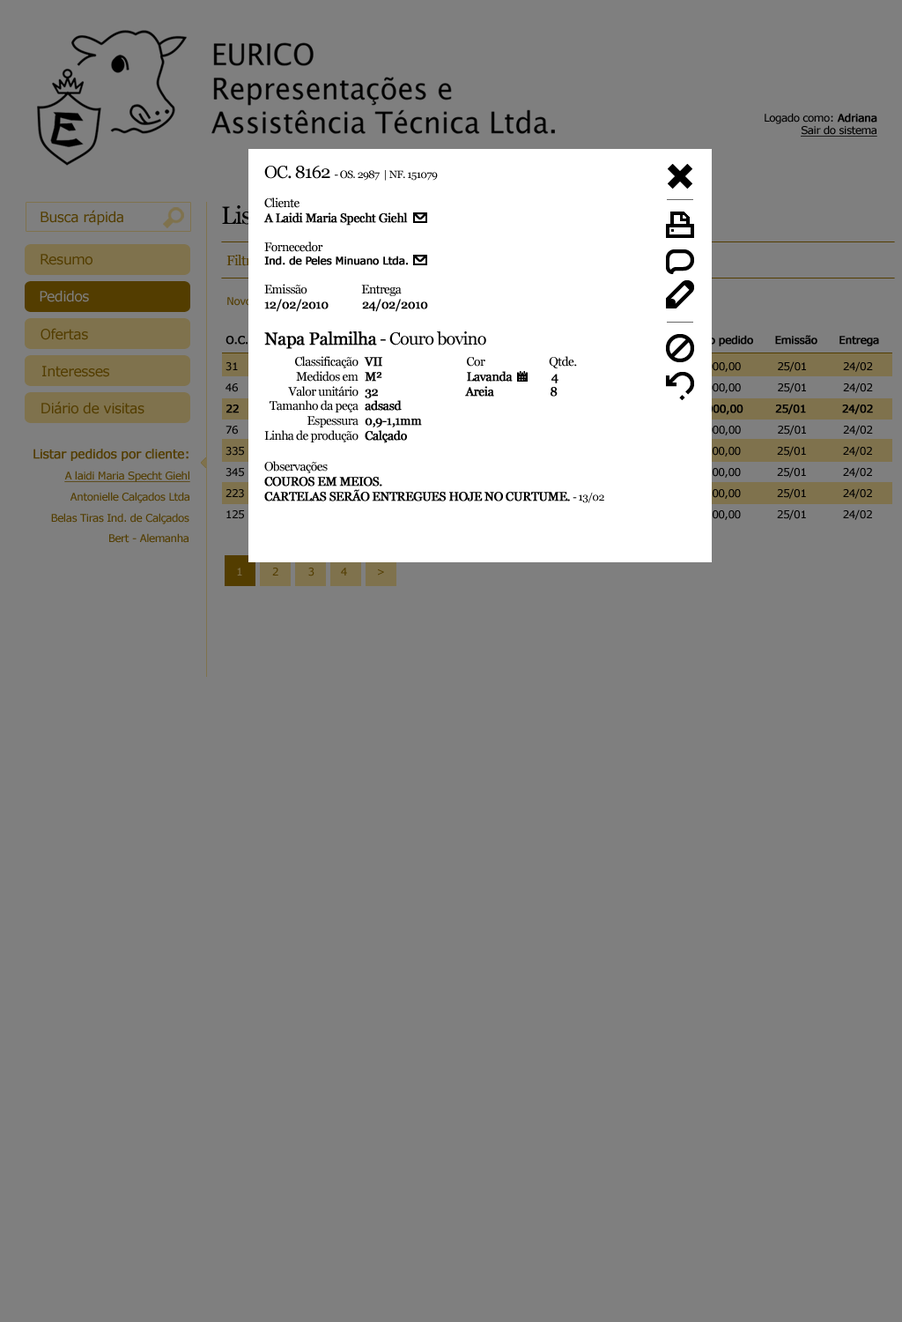
<style>
.page{position:relative;width:902px;height:1322px;background:#7f7f7f}
.page>*{position:absolute;margin:0}
.t1{font:10.6px "Verdana";letter-spacing:-0.04em;color:#000000;text-decoration:underline}
.t2{font:10.6px "Verdana";letter-spacing:-0.04em;color:#000000}
.t3{font:10.6px "Verdana";letter-spacing:-0.04em;color:#000000;font-weight:bold}
.t4{font:10.6px "Georgia";letter-spacing:-0.04em;color:#000000}
.t5{font:17.6px "Georgia";letter-spacing:-0.04em;color:#000000}
.t6{font:12.3px "Georgia";letter-spacing:-0.04em;color:#000000}
.t7{font:12.3px "Georgia";letter-spacing:-0.04em;color:#000000;font-weight:bold}
.t8{font:17.6px "Georgia";letter-spacing:-0.04em;color:#000000;font-weight:bold}
.t9{font:14.1px "Verdana";letter-spacing:-0.04em;color:#533d00}
.t10{font:14.1px "Georgia";letter-spacing:-0.04em;color:#533d00}
.t11{font:14.1px "Verdana";letter-spacing:-0.04em;color:#7f7f7f}
.t12{font:12.3px/14.8px "Georgia";letter-spacing:-0.04em;color:#000000}
.t13{font:12.3px "Verdana";letter-spacing:-0.04em;color:#533d00;font-weight:bold}
.t14{font:10.6px "Verdana";letter-spacing:-0.04em;color:#533d00;text-decoration:underline}
.t15{font:10.6px "Verdana";letter-spacing:-0.04em;color:#533d00}
</style>
<div class="page">
<p class="t1" style="left:765px;top:113px;width:113px;height:24px;text-align:right"><span class="t2">Logado como: </span><span class="t3">Adriana<br></span>Sair do sistema</p>
<p class="t4" style="left:264px;top:166px;width:174px;height:15px"><span class="t5">OC. 8162</span>  - OS. 2987  | NF. 151079</p>
<p class="t6" style="left:263px;top:197px;width:223px;height:152px">Cliente<br><span class="t7">A Laidi Maria Specht Giehl<br></span><br>Fornecedor<br><span class="t3">Ind. de Peles Minuano Ltda.<br></span><br>Emissão                      Entrega<br><span class="t7">12/02/2010            24/02/2010<br><br></span><span class="t8">Napa Palmilha</span><span class="t5"> - Couro bovino</span></p>
<p class="t9" style="left:41px;top:210px;width:82px;height:16px">Busca rápida</p>
<p class="t9" style="left:41px;top:254px;width:52px;height:11px">Resumo</p>
<p class="t10" style="left:226px;top:255px;width:37px;height:11px">Filtrar</p>
<p class="t11" style="left:40px;top:290px;width:49px;height:12px">Pedidos</p>
<p class="t9" style="left:41px;top:328px;width:47px;height:12px">Ofertas</p>
<p class="t9" style="left:42px;top:366px;width:67px;height:11px">Interesses</p>
<p class="t6" style="left:264px;top:356px;width:95px;height:86px;text-align:right">Classificação<br>Medidos em<br>Valor unitário<br>Tamanho da peça<br>Espessura<br>Linha de produção</p>
<p class="t7" style="left:364px;top:356px;width:213px;height:87px">VII                              <span class="t12">Cor                          Qtde.<br></span>M²                              Lavanda              4<br>32                               Areia                    8<br>adsasd<br>0,9-1,1mm<br>Calçado</p>
<p class="t9" style="left:41px;top:401px;width:103px;height:13px">Diário de visitas</p>
<p class="t13" style="left:33px;top:448px;width:156px;height:13px">Listar pedidos por cliente:</p>
<p class="t7" style="left:264px;top:461px;width:340px;height:42px"><span class="t6">Observações<br></span>COUROS EM MEIOS. <br>CARTELAS SERÃO ENTREGUES HOJE NO CURTUME. <span class="t4">- 13/02</span></p>
<p class="t14" style="left:64px;top:471px;width:126px;height:11px">A laidi Maria Specht Giehl</p>
<p class="t15" style="left:70px;top:492px;width:119px;height:11px">Antonielle Calçados Ltda</p>
<p class="t15" style="left:51px;top:513px;width:138px;height:11px">Belas Tiras Ind. de Calçados</p>
<p class="t15" style="left:109px;top:533px;width:80px;height:10px">Bert - Alemanha</p>
<p class="t15" style="left:237px;top:567px;width:147px;height:9px">1         2         3        4         &gt;</p>
</div>
